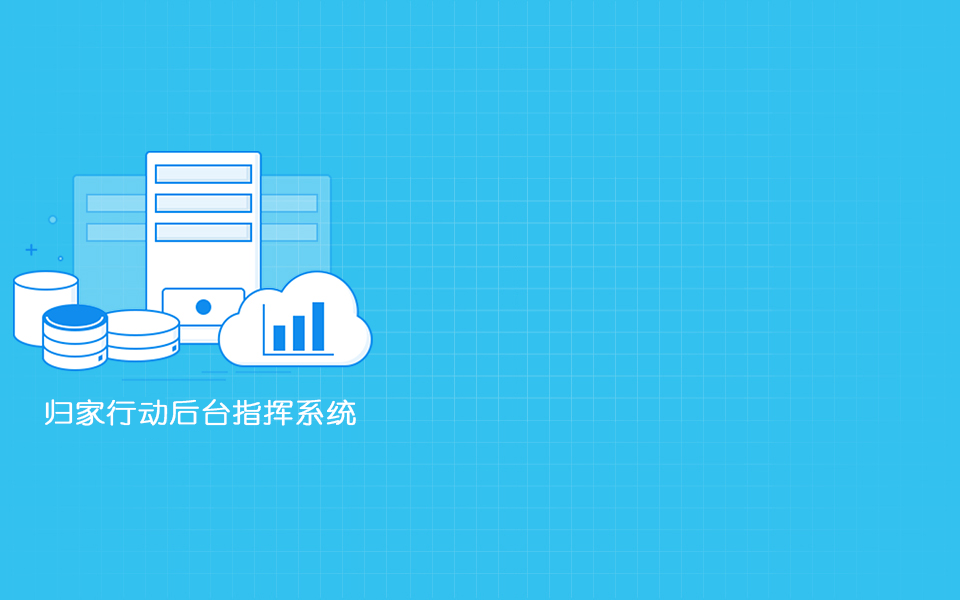
<style>
.page{position:relative;width:960px;height:600px;background:#33c1ef}
.page>*{position:absolute;margin:0}
.t1{font:27px "YouYuan";letter-spacing:0.02em;color:#ffffff;font-weight:bold;scale:1.11 1}
</style>
<div class="page">
<p class="t1" style="left:45px;top:399px;width:311px;height:27px">归家行动后台指挥系统</p>
</div>
